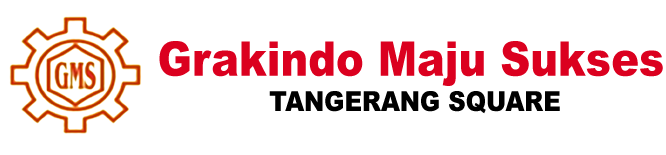
<style>
.page{position:relative;width:666px;height:155px;background:#ffffff}
.page>*{position:absolute;margin:0}
.t1{font:47.8px "Arial-Black";color:#db001f;scale:0.87 1}
.t2{font:27.9px "Arial-Black";color:#000000;scale:0.87 1}
</style>
<div class="page">
<p class="t1" style="left:159px;top:41px;width:504px;height:45px">Grakindo Maju Sukses</p>
<p class="t2" style="left:269px;top:91px;width:291px;height:23px">TANGERANG SQUARE</p>
</div>
